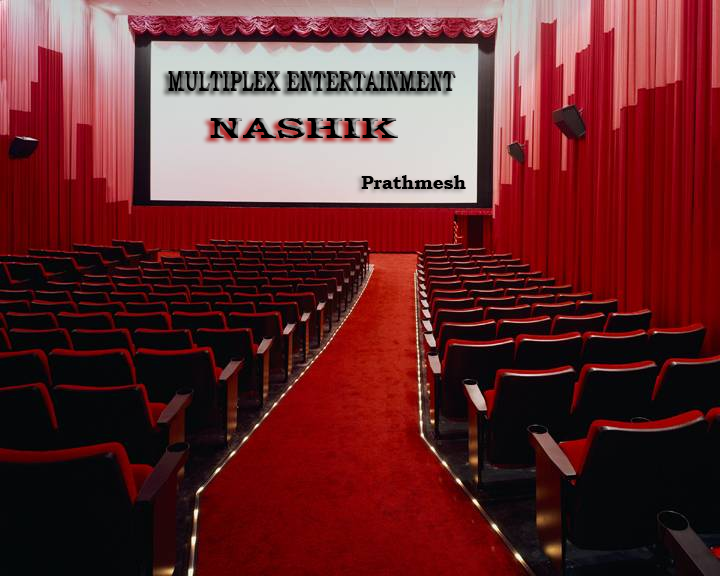
<style>
.page{position:relative;width:720px;height:576px}
.page>*{position:absolute;margin:0}
.t1{font:29.2px "BookmanOldStyle-Bold";color:#000000;scale:0.62 1}
.t2{font:29.2px "BookmanOldStyle-Bold";scale:1.56 1}
.t3{font:18.7px "BookmanOldStyle-Bold";color:#000000}
</style>
<div class="page">
<p class="t1" style="left:168px;top:71px;width:288px;height:20px">MULTIPLEX ENTERTAINMENT</p>
<p class="t2" style="left:210px;top:118px;width:188px;height:20px">NASHIK</p>
<p class="t3" style="left:361px;top:175px;width:105px;height:14px">Prathmesh</p>
</div>
